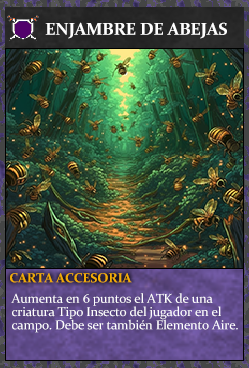
<style>
.page{position:relative;width:249px;height:368px}
.page>*{position:absolute;margin:0}
.t1{font:17.3px "Constantia-Bold";letter-spacing:-0.02em;color:#ffffff}
.t2{font:13.3px "Constantia-Bold";letter-spacing:-0.02em;color:#f2ac05}
.t3{font:13.1px/13.3px "Constantia";letter-spacing:-0.02em;color:#ffffff}
</style>
<div class="page">
<p class="t1" style="left:45px;top:22px;width:182px;height:17px">ENJAMBRE DE ABEJAS</p>
<p class="t2" style="left:10px;top:273px;width:122px;height:10px">CARTA ACCESORIA</p>
<p class="t3" style="left:11px;top:293px;width:227px;height:40px">Aumenta en 6 puntos el ATK de una <br>criatura Tipo Insecto del jugador en el <br>campo. Debe ser también Elemento Aire.</p>
</div>
